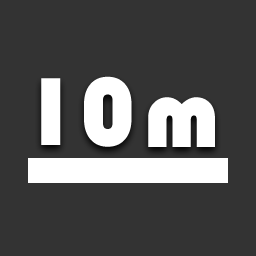
<style>
.page{position:relative;width:256px;height:256px;background:#333333}
.page>*{position:absolute;margin:0}
.t1{font:100px "Bauhaus93";color:#ffffff}
</style>
<div class="page">
<p class="t1" style="left:41px;top:76px;width:91px;height:71px">10</p>
<p class="t1" style="left:148px;top:97px;width:67px;height:50px">m</p>
</div>
